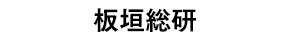
<style>
.page{position:relative;width:289px;height:42px;background:#ffffff}
.page>*{position:absolute;margin:0}
.t1{font:26px "TsukuGoPro-E";color:#000000}
</style>
<div class="page">
<p class="t1" style="left:93px;top:8px;width:103px;height:24px">板垣総研</p>
</div>
